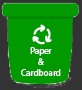
<style>
.page{position:relative;width:82px;height:90px;background:#009900}
.page>*{position:absolute;margin:0}
.t1{font:9px "MyriadPro-Regular";color:#ffffff}
</style>
<div class="page">
<p class="t1" style="left:21px;top:47px;width:40px;height:29px;text-align:center">Paper<br>&amp;<br>Cardboard</p>
</div>
